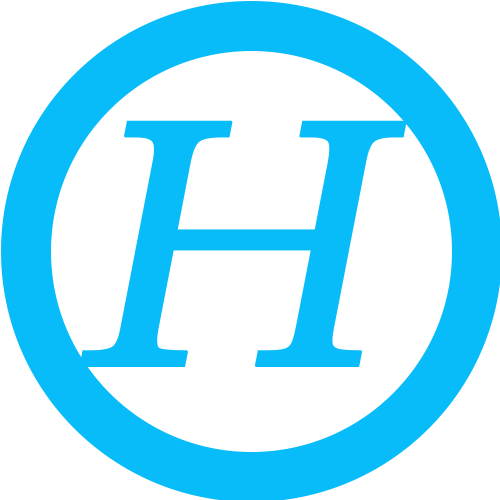
<style>
.page{position:relative;width:500px;height:500px;background:#ffffff}
.page>*{position:absolute;margin:0}
.t1{font:358.7px "STZhongsong";color:#07bcf8;font-weight:bold;font-style:italic;scale:1.1 1}
</style>
<div class="page">
<p class="t1" style="left:79px;top:120px;width:328px;height:247px">H</p>
</div>
